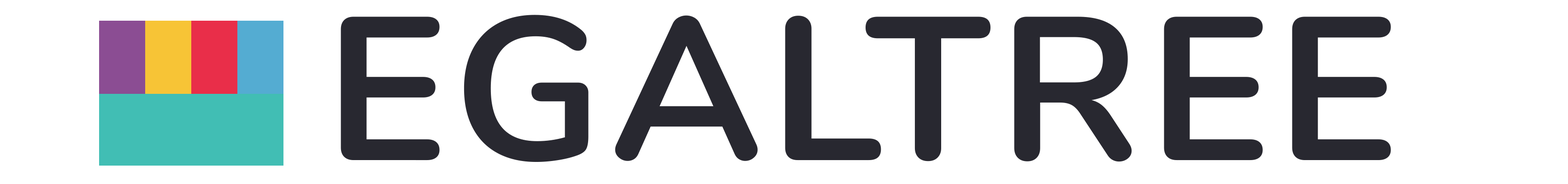
<style>
.page{position:relative;width:1568px;height:184px;background:#ffffff}
.page>*{position:absolute;margin:0}
.t1{font:203.7px "Nunito-Bold";letter-spacing:0.04em;color:#282830}
</style>
<div class="page">
<p class="t1" style="left:341px;top:15px;width:1050px;height:147px">EGALTREE</p>
</div>
